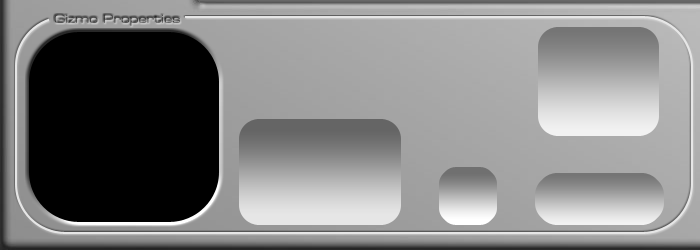
<style>
.page{position:relative;width:700px;height:250px}
.page>*{position:absolute;margin:0}
.t1{font:14px "MetrostyleExtended-Regular";color:#464646}
</style>
<div class="page">
<p class="t1" style="left:54px;top:14px;width:126px;height:12px">Gizmo Properties</p>
</div>
